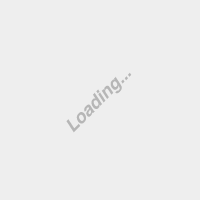
<style>
.page{position:relative;width:200px;height:200px;background:#eeeeee}
.page>*{position:absolute;margin:0}
.t1{font:18px "Helvetica-BoldOblique";color:#b6b6b6}
</style>
<div class="page">
<p class="t1" style="left:66px;top:72px;width:66px;height:61px;rotate:-45deg">Loading...</p>
</div>
